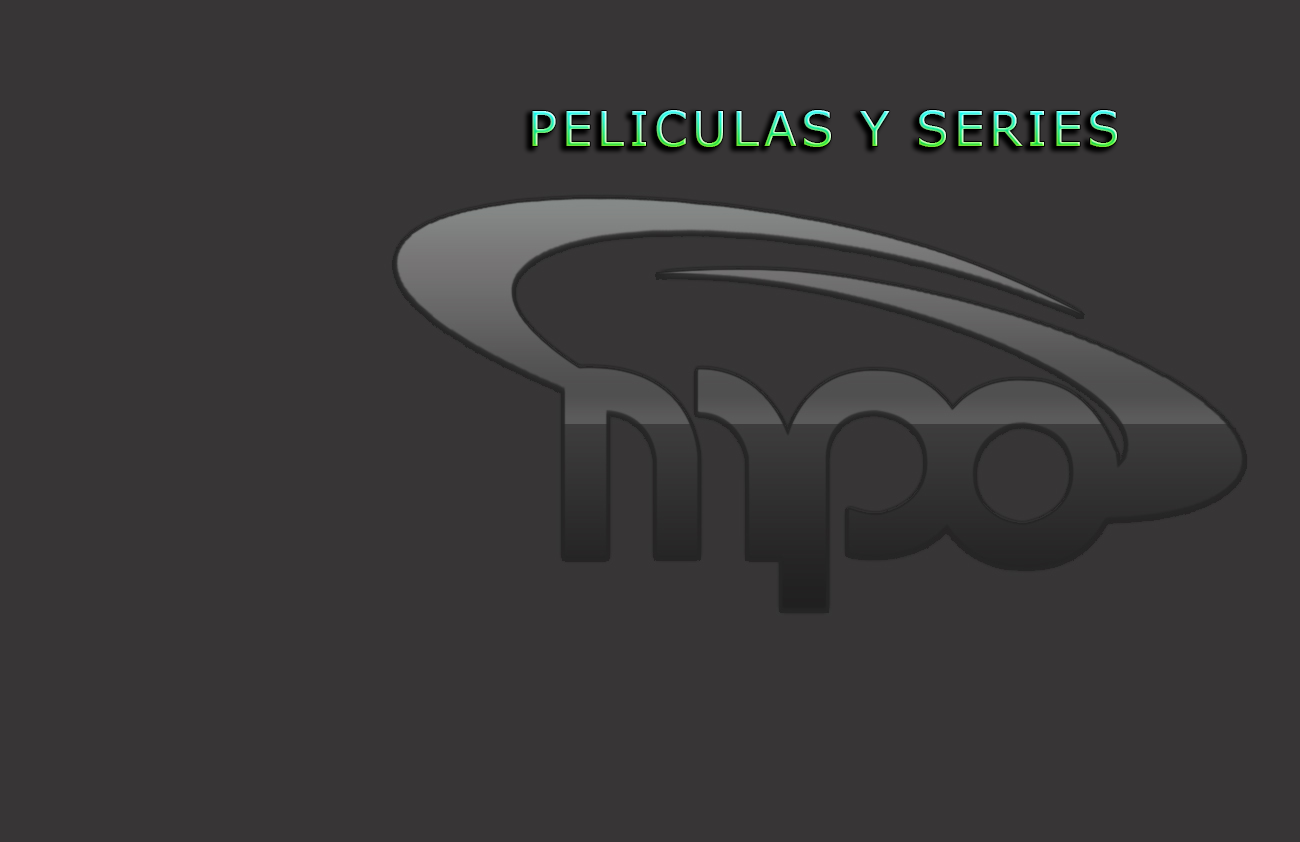
<style>
.page{position:relative;width:1300px;height:842px;background:#373536}
.page>*{position:absolute;margin:0}
.t1{font:48px "MSReferenceSansSerif";letter-spacing:0.1em;text-transform:uppercase}
</style>
<div class="page">
<p class="t1" style="left:532px;top:110px;width:585px;height:37px">Peliculas y series</p>
</div>
